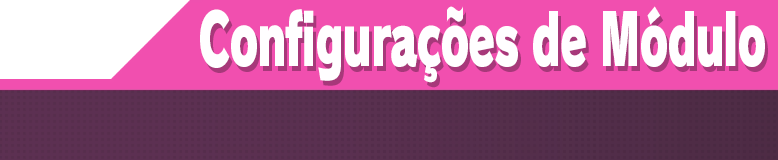
<style>
.page{position:relative;width:778px;height:160px;background:#f14faf}
.page>*{position:absolute;margin:0}
.t1{font:70.7px "RodinPro-UB";letter-spacing:-0.035em;color:#fffeff;scale:0.61 1}
</style>
<div class="page">
<p class="t1" style="left:200px;top:6px;width:565px;height:77px">Configurações de Módulo</p>
</div>
